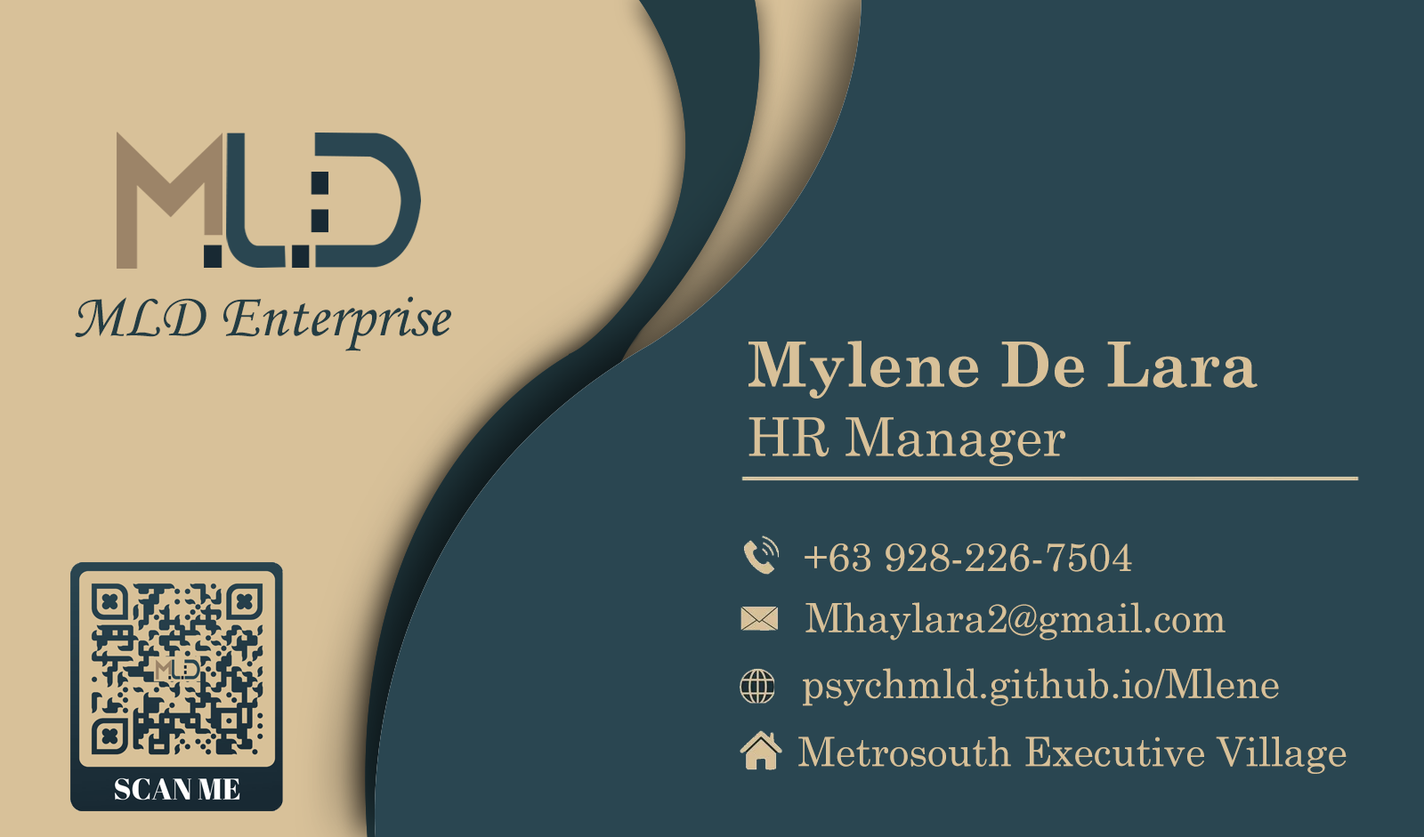
<style>
.page{position:relative;width:1424px;height:837px;background:#2a4651}
.page>*{position:absolute;margin:0}
.t1{font:62.3px "MonotypeCorsiva";color:#233c43}
.t2{font:62.3px "CenturySchoolbook-Bold";color:#d8c199}
.t3{font:53.4px "CenturySchoolbook";color:#d8c199}
.t4{font:40px "CenturySchoolbook";color:#d8c199}
.t5{font:40.4px "CenturySchoolbook";color:#d8c199}
</style>
<div class="page">
<p class="t1" style="left:75px;top:296px;width:376px;height:56px">MLD Enterprise</p>
<p class="t2" style="left:748px;top:341px;width:509px;height:58px">Mylene De Lara</p>
<p class="t3" style="left:748px;top:417px;width:317px;height:49px">HR Manager</p>
<p class="t4" style="left:805px;top:544px;width:327px;height:28px">+63 928-226-7504</p>
<p class="t5" style="left:805px;top:602px;width:420px;height:39px">Mhaylara2@gmail.com</p>
<p class="t5" style="left:803px;top:668px;width:476px;height:39px">psychmld.github.io/Mlene</p>
<p class="t5" style="left:798px;top:737px;width:548px;height:37px">Metrosouth Executive Village</p>
</div>
